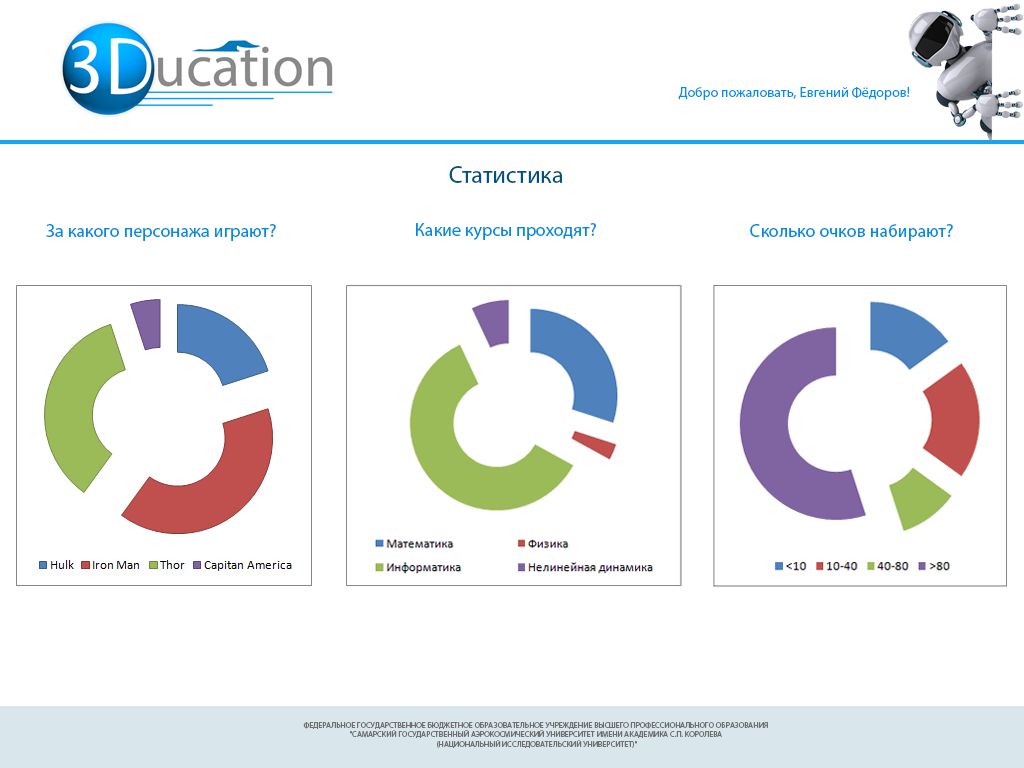
<style>
.page{position:relative;width:1024px;height:768px;background:#ffffff}
.page>*{position:absolute;margin:0}
.t1{font:14px "MyriadPro-Regular";color:#0091e6}
.t2{font:24px "MyriadPro-Regular";color:#005281}
.t3{font:18px "MyriadPro-Regular";color:#008de0}
.t4{font:8px "MyriadPro-Regular";color:#707070}
</style>
<div class="page">
<p class="t1" style="left:678px;top:87px;width:232px;height:13px">Добро пожаловать, Евгений Фёдоров!</p>
<p class="t2" style="left:449px;top:166px;width:114px;height:17px">Статистика</p>
<p class="t3" style="left:46px;top:224px;width:230px;height:17px">За какого персонажа играют?</p>
<p class="t3" style="left:416px;top:223px;width:180px;height:17px">Какие курсы проходят?</p>
<p class="t3" style="left:750px;top:224px;width:203px;height:17px">Сколько очков набирают?</p>
<p class="t4" style="left:303px;top:722px;width:465px;height:26px;text-align:center">ФЕДЕРАЛЬНОЕ ГОСУДАРСТВЕННОЕ БЮДЖЕТНОЕ ОБРАЗОВАТЕЛЬНОЕ УЧРЕЖДЕНИЕ ВЫСШЕГО ПРОФЕССИОНАЛЬНОГО ОБРАЗОВАНИЯ <br>"САМАРСКИЙ ГОСУДАРСТВЕННЫЙ АЭРОКОСМИЧЕСКИЙ УНИВЕРСИТЕТ ИМЕНИ АКАДЕМИКА С.П. КОРОЛЕВА <br>(НАЦИОНАЛЬНЫЙ ИССЛЕДОВАТЕЛЬСКИЙ УНИВЕРСИТЕТ)"</p>
</div>
